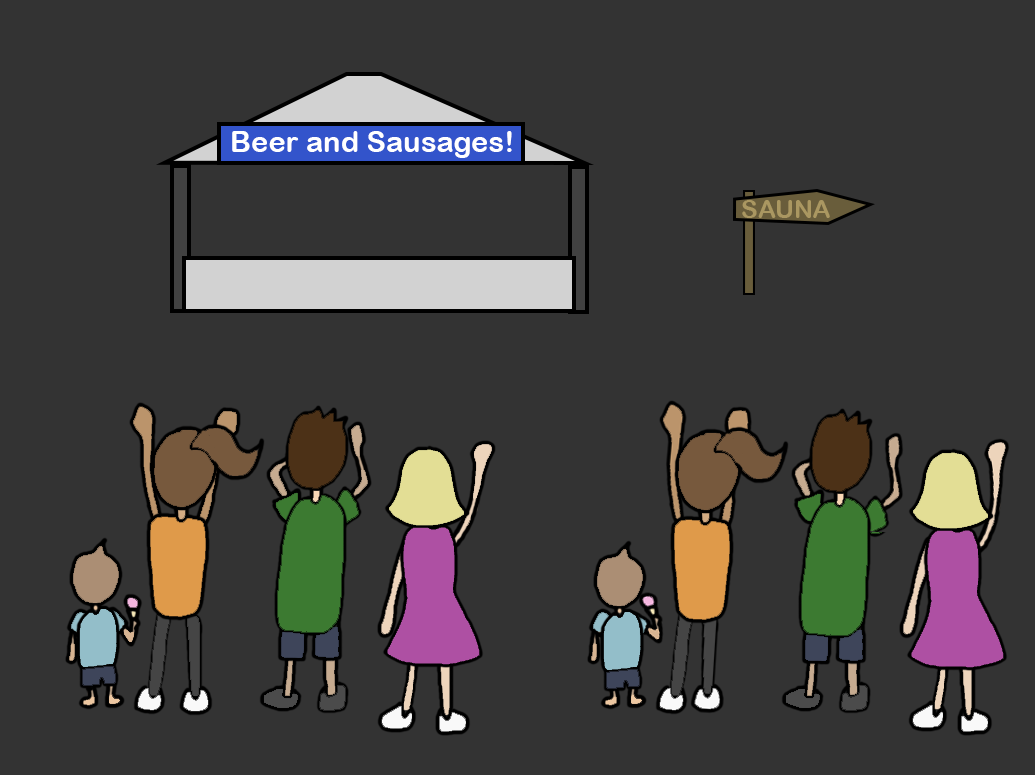
<style>
.page{position:relative;width:1035px;height:775px;background:#333333}
.page>*{position:absolute;margin:0}
.t1{font:29.2px "ArialRoundedMTBold";color:#ffffff}
.t2{font:25px "ArialRoundedMTBold";color:#aa9761}
</style>
<div class="page">
<p class="t1" style="left:232px;top:131px;width:280px;height:27px">Beer and Sausages!</p>
<p class="t2" style="left:742px;top:200px;width:88px;height:18px">SAUNA</p>
</div>
